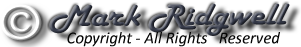
<style>
.page{position:relative;width:301px;height:47px;background:#ffffff}
.page>*{position:absolute;margin:0}
.t1{font:31.2px "HarlowSolid";color:#393e4d;scale:1.23 1}
.t2{font:16.7px "Calibri-Italic";color:#050505}
</style>
<div class="page">
<p class="t1" style="left:49px;top:3px;width:241px;height:33px">Mark Ridgwell</p>
<p class="t2" style="left:67px;top:32px;width:213px;height:15px">Copyright - All Rights   Reserved</p>
</div>
